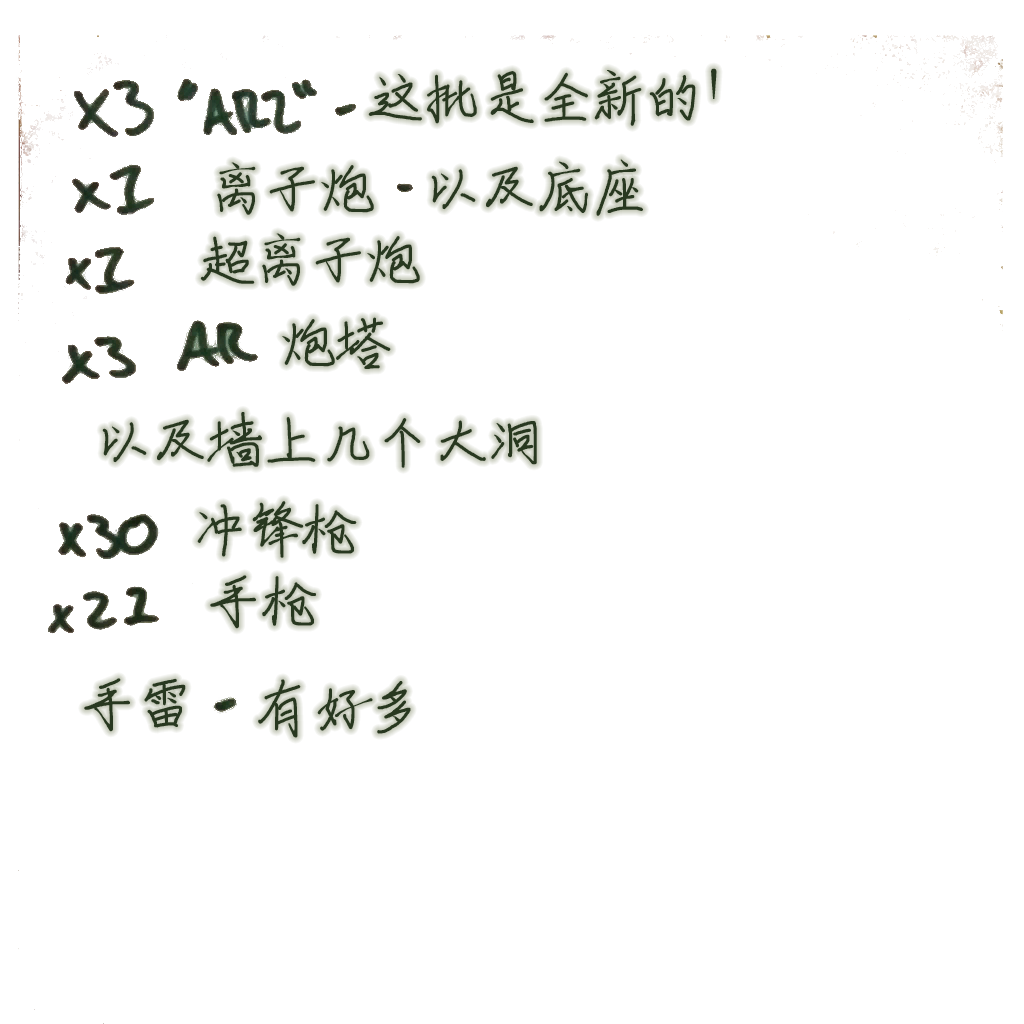
<style>
.page{position:relative;width:1024px;height:1024px;background:#ffffff}
.page>*{position:absolute;margin:0}
.t1{font:62px "ShouShuti";letter-spacing:-0.1em;color:#283820}
</style>
<div class="page">
<p class="t1" style="left:368px;top:68px;width:349px;height:58px">这批是全新的！</p>
<p class="t1" style="left:431px;top:159px;width:212px;height:57px">以及底座</p>
<p class="t1" style="left:217px;top:162px;width:157px;height:53px">离子炮</p>
<p class="t1" style="left:200px;top:233px;width:220px;height:53px">超离子炮</p>
<p class="t1" style="left:282px;top:317px;width:109px;height:52px">炮塔</p>
<p class="t1" style="left:102px;top:412px;width:435px;height:56px">以及墙上几个大洞</p>
<p class="t1" style="left:197px;top:501px;width:160px;height:57px">冲锋枪</p>
<p class="t1" style="left:210px;top:575px;width:106px;height:54px">手枪</p>
<p class="t1" style="left:84px;top:678px;width:102px;height:54px">手雷</p>
<p class="t1" style="left:258px;top:679px;width:153px;height:59px">有好多</p>
</div>
